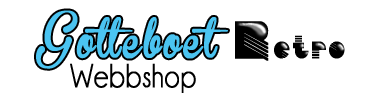
<style>
.page{position:relative;width:380px;height:100px;background:#ffffff}
.page>*{position:absolute;margin:0}
.t1{font:37.4px "BrannbollFet";letter-spacing:0.06em;color:#4bc4f1;font-weight:bold;scale:0.84 1}
.t2{font:44.5px "BrannbollFet";letter-spacing:0.06em;color:#4bc4f1;font-weight:bold;scale:0.84 1}
.t3{font:32.4px "Simulata";letter-spacing:0.1em;color:#000000;font-weight:bold;scale:0.84 1}
.t4{font:38.4px "BrannbollFet";color:#010101;font-weight:bold;scale:0.84 1}
.t5{font:54px "Simulata";letter-spacing:0.1em;color:#000000;font-weight:bold;scale:0.84 1}
.t6{font:33.8px "Champagne&Limousines";color:#000000;font-weight:bold;scale:0.84 1}
</style>
<div class="page">
<p class="t1" style="left:36px;top:10px;width:192px;height:59px"><span class="t2">G</span>otteboet</p>
<p class="t3" style="left:235px;top:21px;width:110px;height:40px"><span class="t4"> </span><span class="t5">R</span>etro</p>
<p class="t6" style="left:70px;top:63px;width:126px;height:30px">Webbshop</p>
</div>
